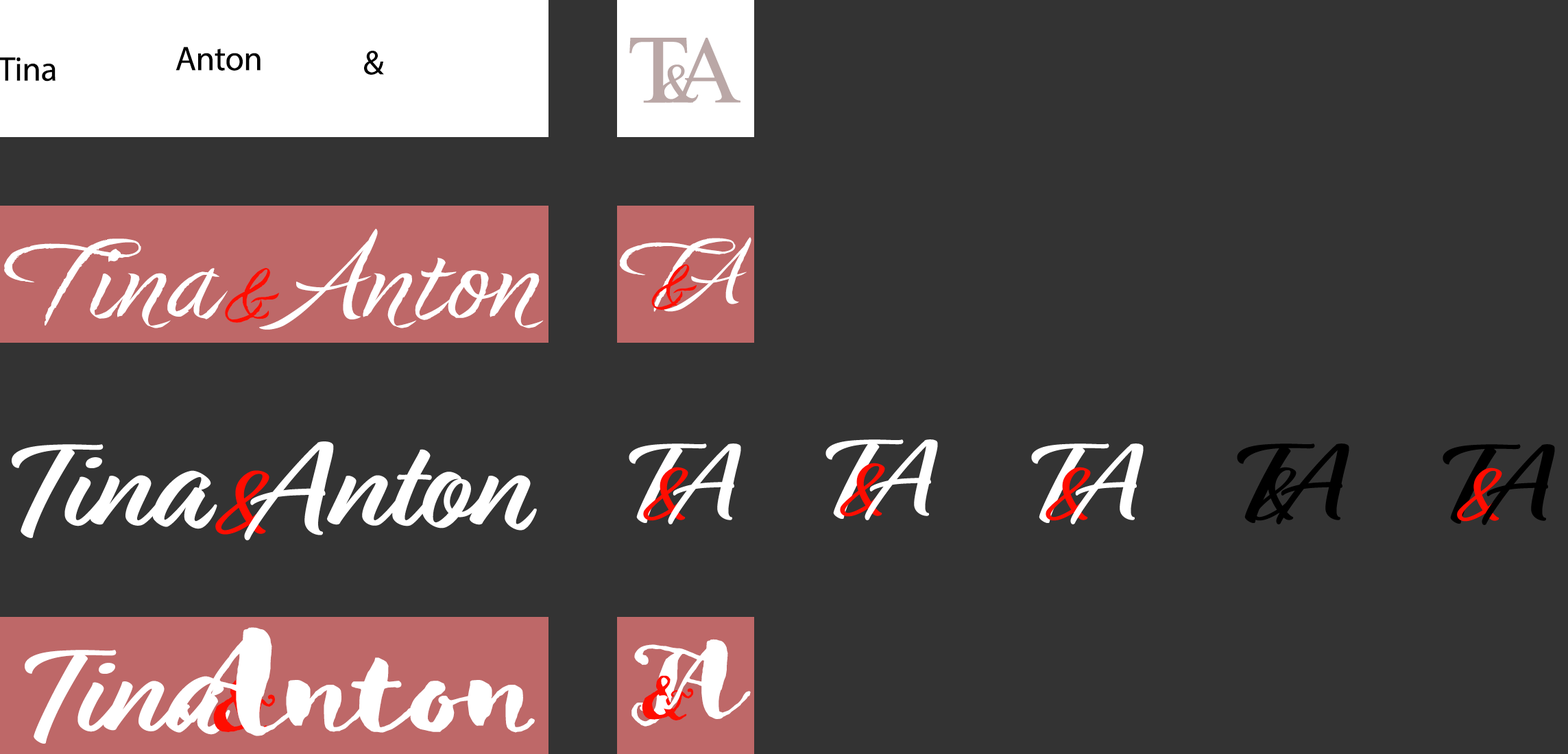
<style>
.page{position:relative;width:1568px;height:754px;background:#333333}
.page>*{position:absolute;margin:0}
.t1{font:97.8px "TimesNewRomanPSMT";letter-spacing:-0.01em;color:#baa7a6;scale:1.06 1}
.t2{font:95.4px "TimesNewRomanPSMT";letter-spacing:-0.01em;color:#baa7a6}
.t3{font:34.3px "MyriadPro-Regular";letter-spacing:-0.01em;color:#000000}
.t4{font:54.6px "TimesNewRomanPSMT";letter-spacing:-0.01em;color:#baa7a6}
.t5{font:134.3px "DreamBig-Wide";letter-spacing:-0.01em;color:#ffffff}
.t6{font:113.4px "DreamBig-Wide";letter-spacing:-0.01em;color:#ffffff}
.t7{font:98.7px "DreamBig-Wide";letter-spacing:-0.01em;color:#ffffff}
.t8{font:80.6px "DreamBig-Wide";letter-spacing:-0.01em;color:#ff0d00}
.t9{font:67.1px "DreamBig-Wide";letter-spacing:-0.01em;color:#ff0d00}
.t10{font:134.3px "Relation-Bold";letter-spacing:-0.01em;color:#ffffff}
.t11{font:113.8px "Relation-Bold";letter-spacing:-0.01em;color:#ffffff}
.t12{font:109.7px "Relation-Bold";letter-spacing:-0.01em;color:#ffffff}
.t13{font:113.8px "Relation-Bold";letter-spacing:-0.01em;color:#000000}
.t14{font:109.7px "Relation-Bold";letter-spacing:-0.01em;color:#000000}
.t15{font:80.6px "Relation-Bold";letter-spacing:-0.01em;color:#ff0d00}
.t16{font:67.1px "Relation-Bold";letter-spacing:-0.01em;color:#ff0d00}
.t17{font:67.1px "Relation-Bold";letter-spacing:-0.01em;color:#000000}
.t18{font:134.3px "GoodlifeBrush";letter-spacing:-0.01em;color:#ffffff}
.t19{font:98.7px "GoodlifeBrush";letter-spacing:-0.01em;color:#ffffff}
.t20{font:113.4px "GoodlifeBrush";letter-spacing:-0.01em;color:#ffffff}
.t21{font:67.1px "GoodlifeBrush";letter-spacing:-0.01em;color:#ff0d00}
.t22{font:80.6px "GoodlifeBrush";letter-spacing:-0.01em}
</style>
<div class="page">
<p class="t1" style="left:629px;top:38px;width:59px;height:65px">T</p>
<p class="t2" style="left:673px;top:38px;width:67px;height:65px">A</p>
<p class="t3" style="left:176px;top:47px;width:85px;height:24px">Anton</p>
<p class="t3" style="left:364px;top:51px;width:20px;height:24px">&amp;</p>
<p class="t4" style="left:658px;top:64px;width:41px;height:39px">&amp;</p>
<p class="t5" style="left:259px;top:228px;width:285px;height:102px">Anton</p>
<p class="t5" style="left:4px;top:239px;width:224px;height:89px">Tina</p>
<p class="t6" style="left:620px;top:238px;width:116px;height:74px">T</p>
<p class="t7" style="left:664px;top:237px;width:87px;height:75px">A</p>
<p class="t8" style="left:225px;top:268px;width:54px;height:55px">&amp;</p>
<p class="t9" style="left:651px;top:264px;width:46px;height:46px">&amp;</p>
<p class="t10" style="left:12px;top:444px;width:205px;height:94px">Tina</p>
<p class="t10" style="left:244px;top:442px;width:293px;height:99px">Anton</p>
<p class="t11" style="left:629px;top:444px;width:78px;height:79px">T</p>
<p class="t12" style="left:668px;top:444px;width:73px;height:80px">A</p>
<p class="t11" style="left:825px;top:439px;width:79px;height:80px">T</p>
<p class="t12" style="left:865px;top:439px;width:73px;height:81px">A</p>
<p class="t11" style="left:1031px;top:444px;width:78px;height:79px">T</p>
<p class="t12" style="left:1070px;top:444px;width:74px;height:80px">A</p>
<p class="t13" style="left:1237px;top:444px;width:78px;height:79px">T</p>
<p class="t14" style="left:1276px;top:444px;width:73px;height:80px">A</p>
<p class="t13" style="left:1443px;top:444px;width:78px;height:80px">T</p>
<p class="t14" style="left:1482px;top:444px;width:73px;height:81px">A</p>
<p class="t15" style="left:215px;top:470px;width:58px;height:65px">&amp;</p>
<p class="t16" style="left:643px;top:467px;width:48px;height:54px">&amp;</p>
<p class="t16" style="left:840px;top:463px;width:48px;height:54px">&amp;</p>
<p class="t16" style="left:1046px;top:467px;width:48px;height:54px">&amp;</p>
<p class="t17" style="left:1251px;top:467px;width:48px;height:54px">&amp;</p>
<p class="t16" style="left:1457px;top:468px;width:48px;height:54px">&amp;</p>
<p class="t18" style="left:175px;top:627px;width:360px;height:109px">Anton</p>
<p class="t19" style="left:656px;top:639px;width:95px;height:80px">A</p>
<p class="t10" style="left:25px;top:650px;width:205px;height:94px">Tina</p>
<p class="t20" style="left:631px;top:644px;width:83px;height:83px">T</p>
<p class="t21" style="left:642px;top:675px;width:52px;height:46px">&amp;</p>
<p class="t22" style="left:213px;top:679px;width:62px;height:55px">&amp;</p>
</div>
